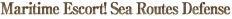
<style>
.page{position:relative;width:232px;height:19px;background:#ffffff}
.page>*{position:absolute;margin:0}
.t1{font:16px "RyuminPro-ExBold";letter-spacing:-0.08em;color:#6e5941;font-weight:bold;scale:0.9 1}
</style>
<div class="page">
<p class="t1" style="left:0px;top:2px;width:231px;height:13px">Maritime Escort! Sea Routes Defense</p>
</div>
